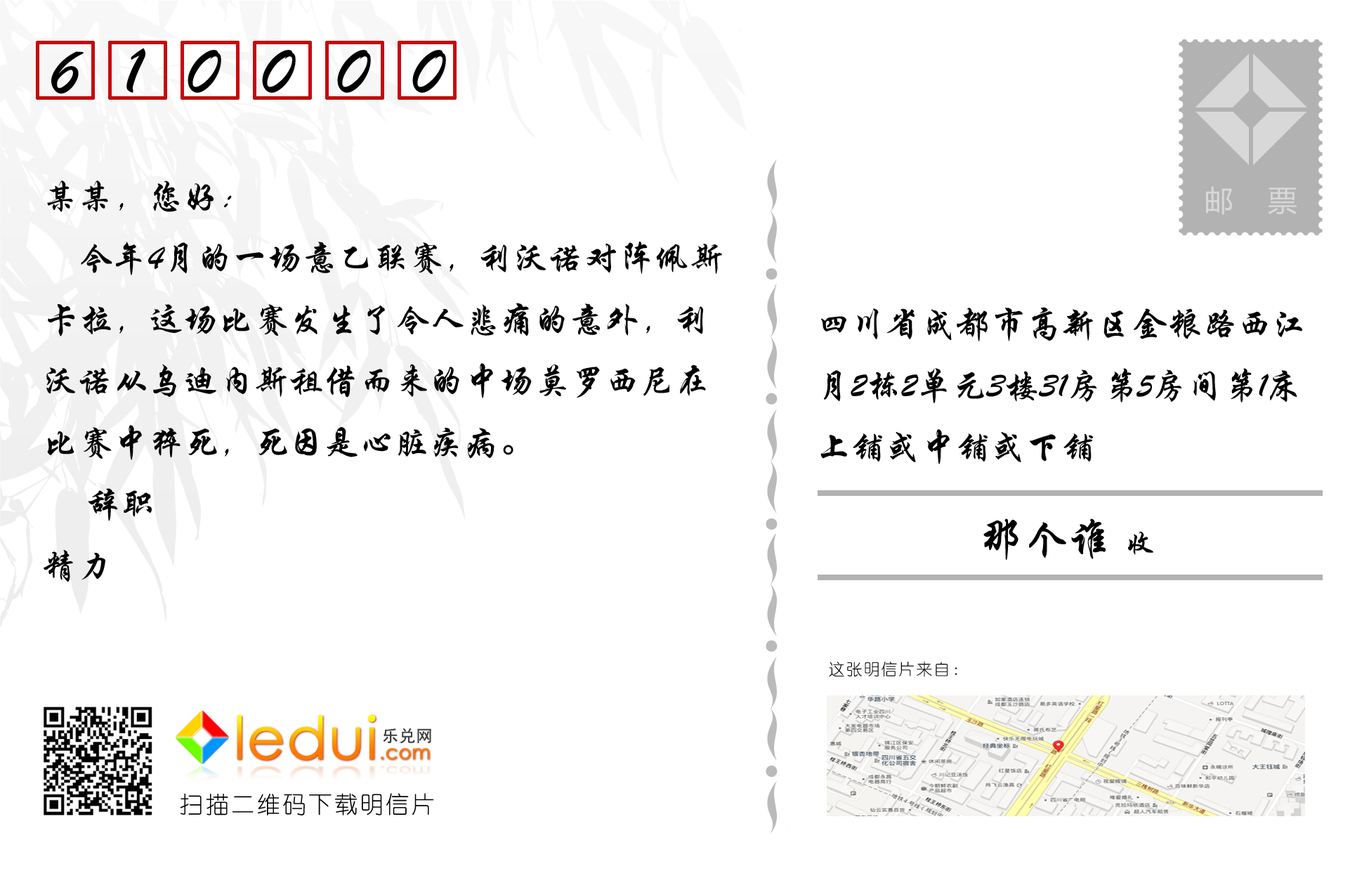
<style>
.page{position:relative;width:1369px;height:871px;background:#ffffff}
.page>*{position:absolute;margin:0}
.t1{font:70.2px "STXingkai";letter-spacing:0.63em;color:#000000}
.t2{font:35.1px "STXingkai";color:#000000}
.t3{font:29.3px "MicrosoftYaHei";color:#d8d8d8}
.t4{font:43.9px "STXingkai";color:#000000}
.t5{font:29.3px "STXingkai";color:#000000}
.t6{font:15.9px "YouYuan";letter-spacing:0.1em;color:#000000}
.t7{font:58.8px "CenturyGothic";font-weight:bold}
.t8{font:19.6px "CenturyGothic";font-weight:bold}
.t9{font:16.2px "SimHei";letter-spacing:0.05em;color:#3d3d3d}
.t10{font:35.3px "CenturyGothic";font-weight:bold;scale:1.67 1}
.t11{font:11.8px "CenturyGothic";font-weight:bold;scale:1.67 1}
.t12{font:23.4px "YouYuan";letter-spacing:0.1em;color:#000000}
</style>
<div class="page">
<p class="t1" style="left:51px;top:48px;width:395px;height:46px">610000</p>
<p class="t2" style="left:44px;top:181px;width:678px;height:401px">某某，您好：<br>    今年4月的一场意乙联赛，利沃诺对阵佩斯<br>卡拉，这场比赛发生了令人悲痛的意外，利<br>沃诺从乌迪内斯租借而来的中场莫罗西尼在<br>比赛中猝死，死因是心脏疾病。<br>     辞职<br>精力</p>
<p class="t3" style="left:1206px;top:186px;width:91px;height:29px">邮    票</p>
<p class="t2" style="left:820px;top:307px;width:482px;height:157px">四川省成都市高新区金粮路西江<br>月2栋2单元3楼31房第5房间第1床<br>上铺或中铺或下铺</p>
<p class="t4" style="left:983px;top:518px;width:170px;height:42px">那个谁<span class="t5">  收</span></p>
<p class="t6" style="left:829px;top:661px;width:128px;height:16px">这张明信片来自：</p>
<p class="t7" style="left:237px;top:714px;width:192px;height:46px">ledui<span class="t8">.com</span></p>
<p class="t9" style="left:383px;top:728px;width:48px;height:16px">乐兑网</p>
<p class="t10" style="left:237px;top:766px;width:192px;height:28px">ledui<span class="t11">.com</span></p>
<p class="t12" style="left:180px;top:793px;width:254px;height:23px">扫描二维码下载明信片</p>
</div>
